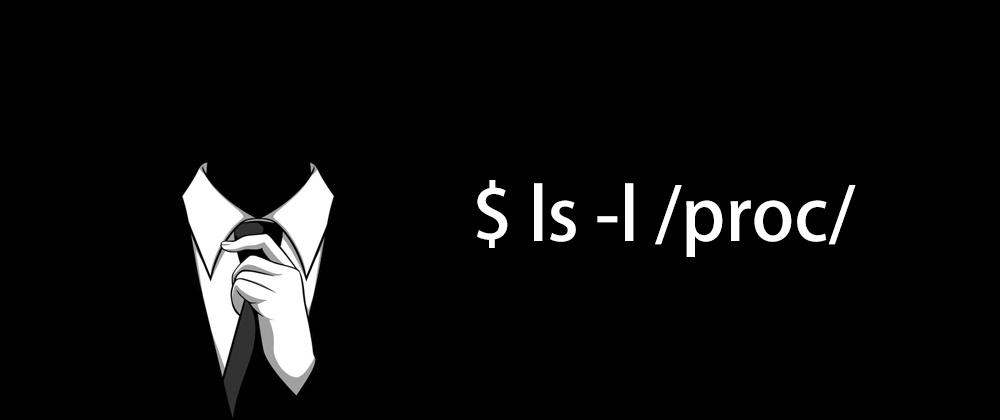
<style>
.page{position:relative;width:1000px;height:420px;background:#000000}
.page>*{position:absolute;margin:0}
.t1{font:72px "AdobeHeitiStd-Regular";color:#ffffff}
</style>
<div class="page">
<p class="t1" style="left:477px;top:180px;width:379px;height:77px">$ ls -l /proc/</p>
</div>
